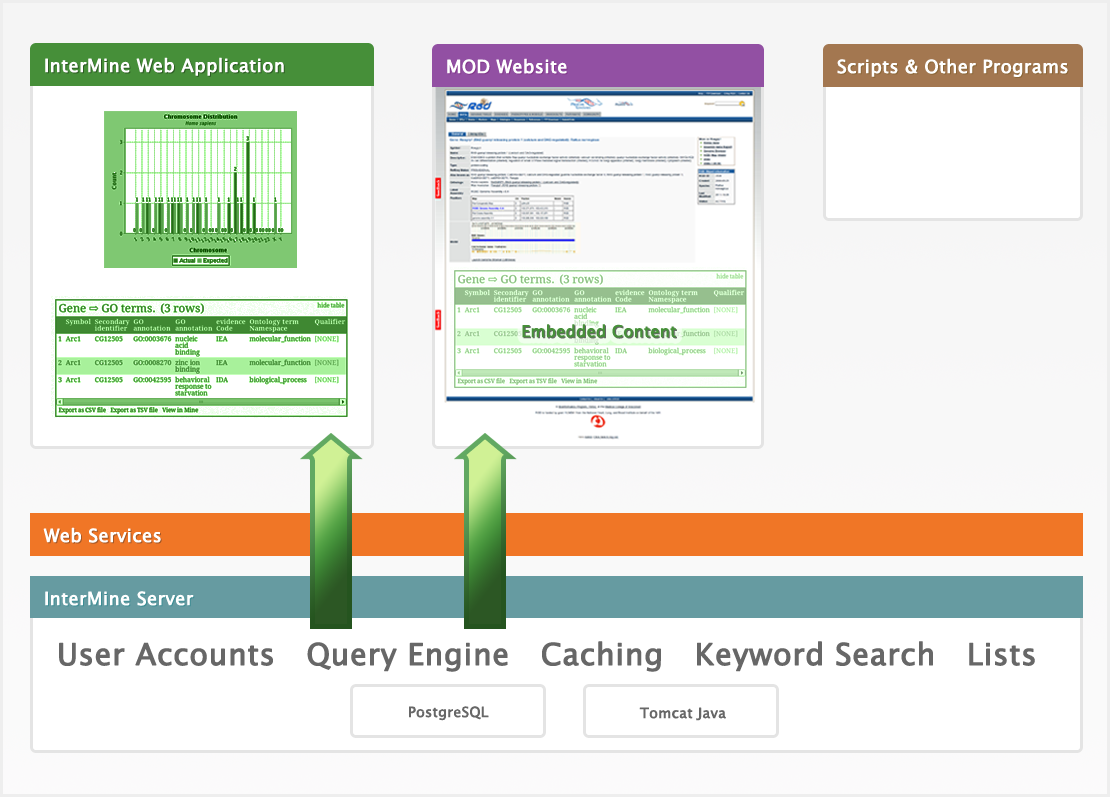
<style>
.page{position:relative;width:1110px;height:797px;background:#ffffff}
.page>*{position:absolute;margin:0}
.t1{font:18px "LucidaGrande";color:#ffffff;font-weight:bold}
.t2{font:18px "LucidaGrande";font-weight:bold}
.t3{font:16px "LucidaGrande";color:#468f39;font-weight:bold}
.t4{font:16px "LucidaGrande";color:#52804a;font-weight:bold}
.t5{font:30px "LucidaGrande";color:#676767;font-weight:bold}
.t6{font:14px "LucidaGrande";color:#676767;font-weight:bold}
</style>
<div class="page">
<p class="t1" style="left:45px;top:57px;width:239px;height:19px">InterMine Web Application</p>
<p class="t2" style="left:46px;top:58px;width:239px;height:19px">InterMine Web Application</p>
<p class="t1" style="left:447px;top:58px;width:120px;height:16px">MOD Website</p>
<p class="t2" style="left:448px;top:59px;width:120px;height:16px">MOD Website</p>
<p class="t1" style="left:837px;top:58px;width:231px;height:19px">Scripts &amp; Other Programs</p>
<p class="t2" style="left:838px;top:59px;width:231px;height:19px">Scripts &amp; Other Programs</p>
<p class="t3" style="left:522px;top:324px;width:154px;height:14px">Embedded Content</p>
<p class="t4" style="left:523px;top:325px;width:154px;height:14px">Embedded Content</p>
<p class="t1" style="left:43px;top:527px;width:118px;height:16px">Web Services</p>
<p class="t2" style="left:44px;top:528px;width:118px;height:16px">Web Services</p>
<p class="t1" style="left:45px;top:591px;width:149px;height:15px">InterMine Server</p>
<p class="t2" style="left:46px;top:592px;width:149px;height:15px">InterMine Server</p>
<p class="t5" style="left:59px;top:641px;width:976px;height:31px">User Accounts   Query Engine   Caching   Keyword Search   Lists</p>
<p class="t6" style="left:409px;top:706px;width:80px;height:15px">PostgreSQL</p>
<p class="t6" style="left:639px;top:707px;width:87px;height:14px">Tomcat Java</p>
</div>
